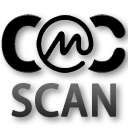
<style>
.page{position:relative;width:128px;height:128px}
.page>*{position:absolute;margin:0}
.t1{font:41.7px "AdobeHeitiStd-Regular";font-weight:bold}
</style>
<div class="page">
<p class="t1" style="left:11px;top:83px;width:105px;height:35px">SCAN</p>
</div>
